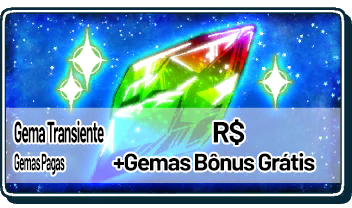
<style>
.page{position:relative;width:352px;height:208px}
.page>*{position:absolute;margin:0}
.t1{font:29.8px "Barlow-Bold";letter-spacing:-0.05em;color:#000000;scale:0.45 1}
.t2{font:29.3px "Barlow-Bold";letter-spacing:-0.05em;color:#000000}
.t3{font:23.3px "Barlow-Bold";letter-spacing:-0.05em;color:#000000;scale:0.4 1}
.t4{font:24px "Barlow-Bold";letter-spacing:-0.05em;color:#000000}
</style>
<div class="page">
<p class="t1" style="left:14px;top:120px;width:90px;height:23px">Gema Transiente</p>
<p class="t2" style="left:213px;top:119px;width:32px;height:26px">R$</p>
<p class="t3" style="left:14px;top:153px;width:51px;height:22px">Gemas Pagas</p>
<p class="t4" style="left:113px;top:153px;width:202px;height:18px">+Gemas Bônus Grátis</p>
</div>
